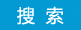
<style>
.page{position:relative;width:81px;height:30px;background:#039ad3}
.page>*{position:absolute;margin:0}
.t1{font:18px "MicrosoftYaHei";color:#ffffff}
.t2{font:19px "MicrosoftYaHei";color:#039ad3}
</style>
<div class="page">
<p class="t1" style="left:17px;top:6px;width:55px;height:19px">搜  索<span class="t2">s</span></p>
</div>
